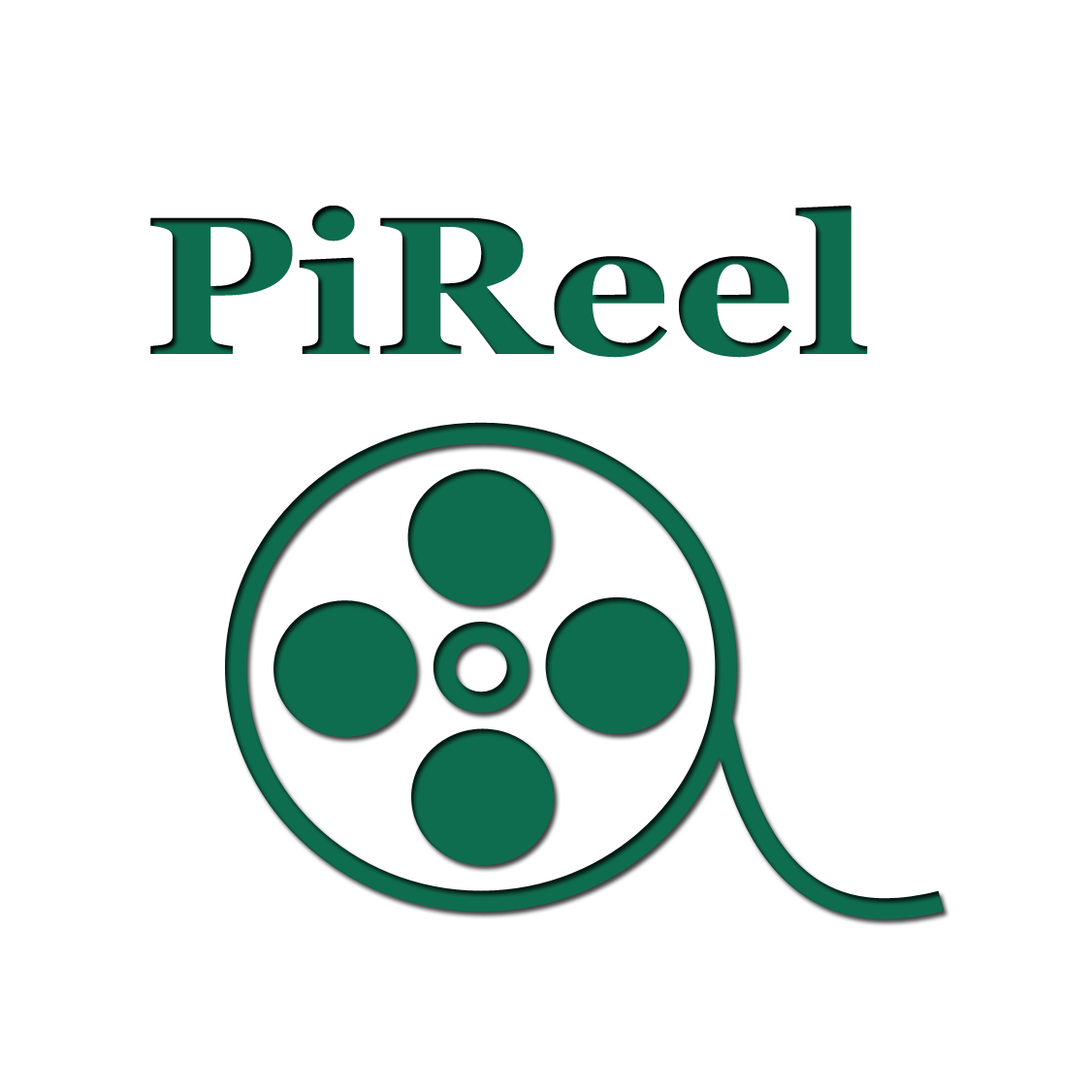
<style>
.page{position:relative;width:1092px;height:1092px;background:#ffffff}
.page>*{position:absolute;margin:0}
.t1{font:196px "Georgia-Bold";color:#0f6d4f;scale:1.11 1}
</style>
<div class="page">
<p class="t1" style="left:150px;top:206px;width:718px;height:152px">PiReel</p>
</div>
